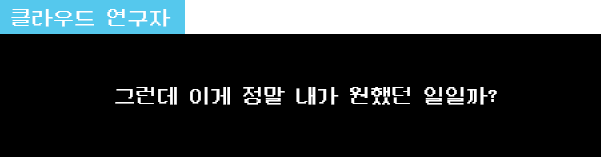
<style>
.page{position:relative;width:601px;height:157px;background:#000000}
.page>*{position:absolute;margin:0}
.t1{font:21.3px "DungGeunMo";color:#ffffff}
</style>
<div class="page">
<p class="t1" style="left:11px;top:9px;width:160px;height:18px">클라우드 연구자</p>
<p class="t1" style="left:115px;top:87px;width:382px;height:18px">그런데 이게 정말 내가 원했던 일일까?</p>
</div>
